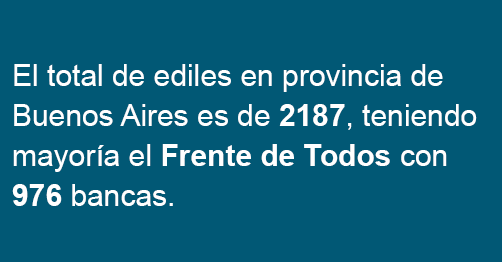
<style>
.page{position:relative;width:502px;height:262px;background:#015875}
.page>*{position:absolute;margin:0}
.t1{font:30px/40px "ArialMT";color:#ffffff}
.t2{font:30px/40px "Arial-BoldMT";color:#ffffff}
</style>
<div class="page">
<p class="t1" style="left:12px;top:64px;width:465px;height:142px">El total de ediles en provincia de Buenos Aires es de <span class="t2">2187</span>, teniendo mayoría el <span class="t2">Frente de Todos</span> con <span class="t2">976 </span>bancas.</p>
</div>
